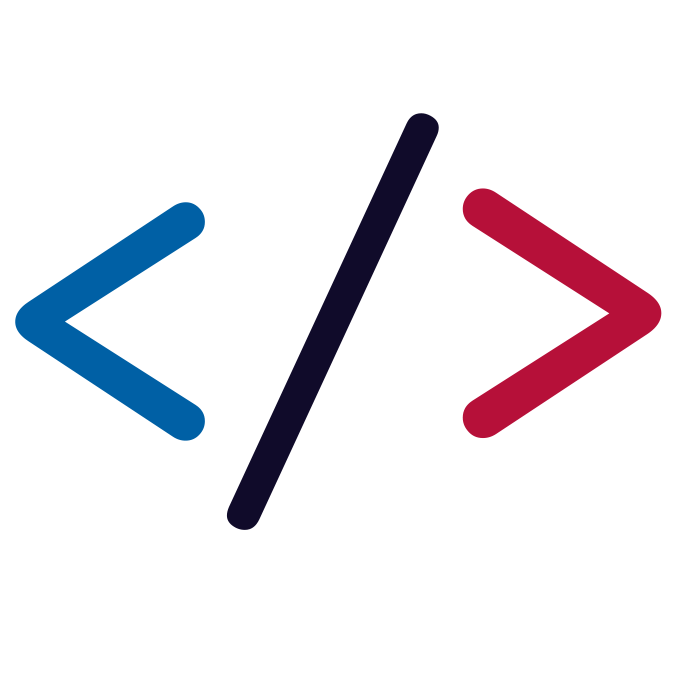
<style>
.page{position:relative;width:682px;height:682px;background:#ffffff}
.page>*{position:absolute;margin:0}
.t1{font:459.2px "UDDigiKyokashoN-B";letter-spacing:-0.018em;color:#0060a5}
.t2{font:459.2px "UDDigiKyokashoN-B";letter-spacing:-0.018em;color:#100b2a}
.t3{font:480.8px "UDDigiKyokashoN-B";letter-spacing:0.01em;color:#b61039}
</style>
<div class="page">
<p class="t1" style="left:15px;top:113px;width:647px;height:417px">&lt;<span class="t2">/</span><span class="t3">&gt;</span></p>
</div>
